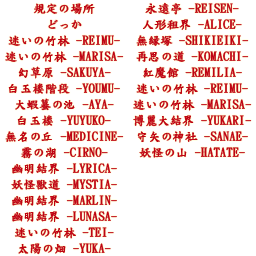
<style>
.page{position:relative;width:256px;height:256px;background:#ffffff}
.page>*{position:absolute;margin:0}
.t1{font:12px/16px "DFKaiShu-SB-Estd-BF";color:#bf0313;font-weight:bold}
</style>
<div class="page">
<p class="t1" style="left:5px;top:3px;width:119px;height:252px;text-align:center">規定の場所<br>どっか<br>迷いの竹林 -REIMU-<br>迷いの竹林 -MARISA-<br>幻草原 -SAKUYA-<br>白玉楼階段 -YOUMU-<br>大蝦蟇の池 -AYA-<br>白玉楼 -YUYUKO-<br>無名の丘 -MEDICINE-<br>霧の湖 -CIRNO-<br>幽明結界 -LYRICA-<br>妖怪獣道 -MYSTIA-<br>幽明結界 -MARLIN-<br>幽明結界 -LUNASA-<br>迷いの竹林 -TEI-<br>太陽の畑 -YUKA-</p>
<p class="t1" style="left:133px;top:2px;width:119px;height:156px;text-align:center">永遠亭 -REISEN-<br>人形租界 -ALICE-<br>無縁塚 -SHIKIEIKI-<br>再思の道 -KOMACHI-<br>紅魔館 -REMILIA-<br>迷いの竹林 -REIMU-<br>迷いの竹林 -MARISA-<br>博麗大結界 -YUKARI-<br>守矢の神社 -SANAE-<br>妖怪の山 -HATATE-</p>
</div>
